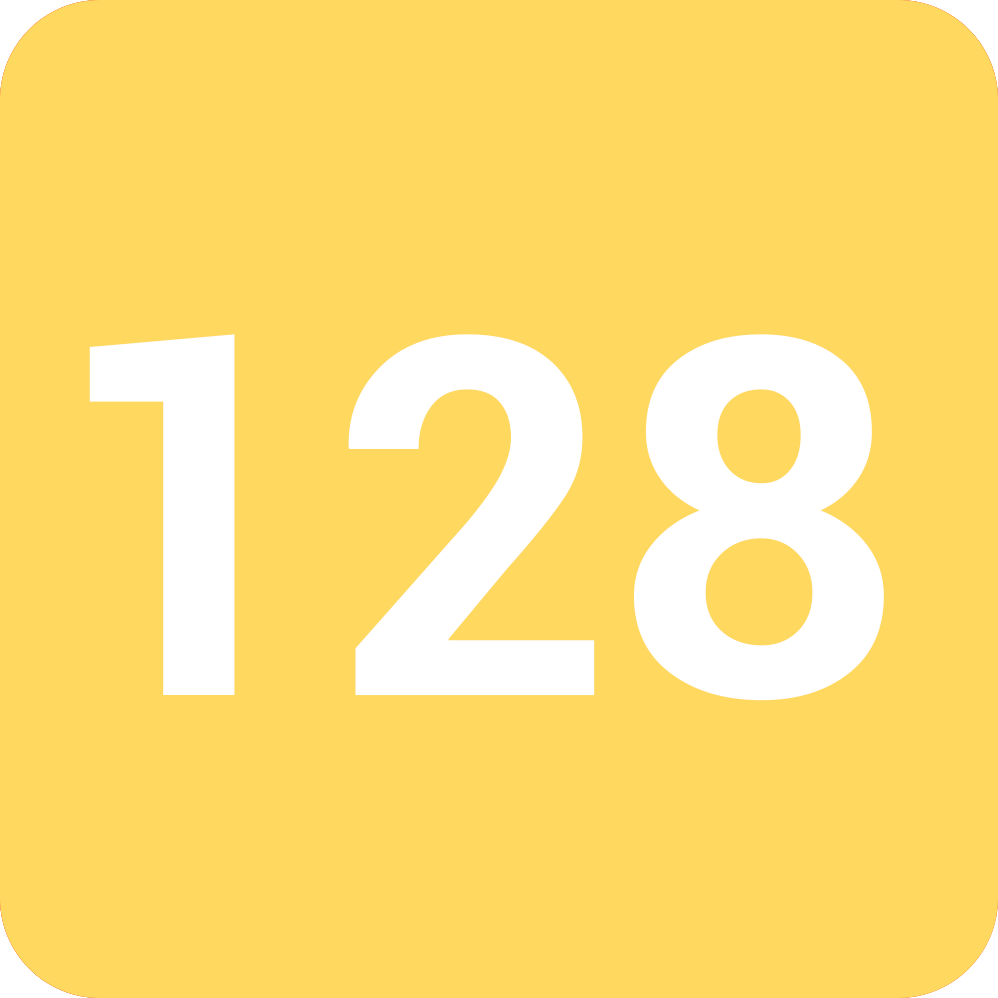
<style>
.page{position:relative;width:998px;height:998px;background:#ffd860}
.page>*{position:absolute;margin:0}
.t1{font:500px "Roboto-Bold";color:#ffffff}
</style>
<div class="page">
<p class="t1" style="left:89px;top:334px;width:795px;height:367px">128</p>
</div>
